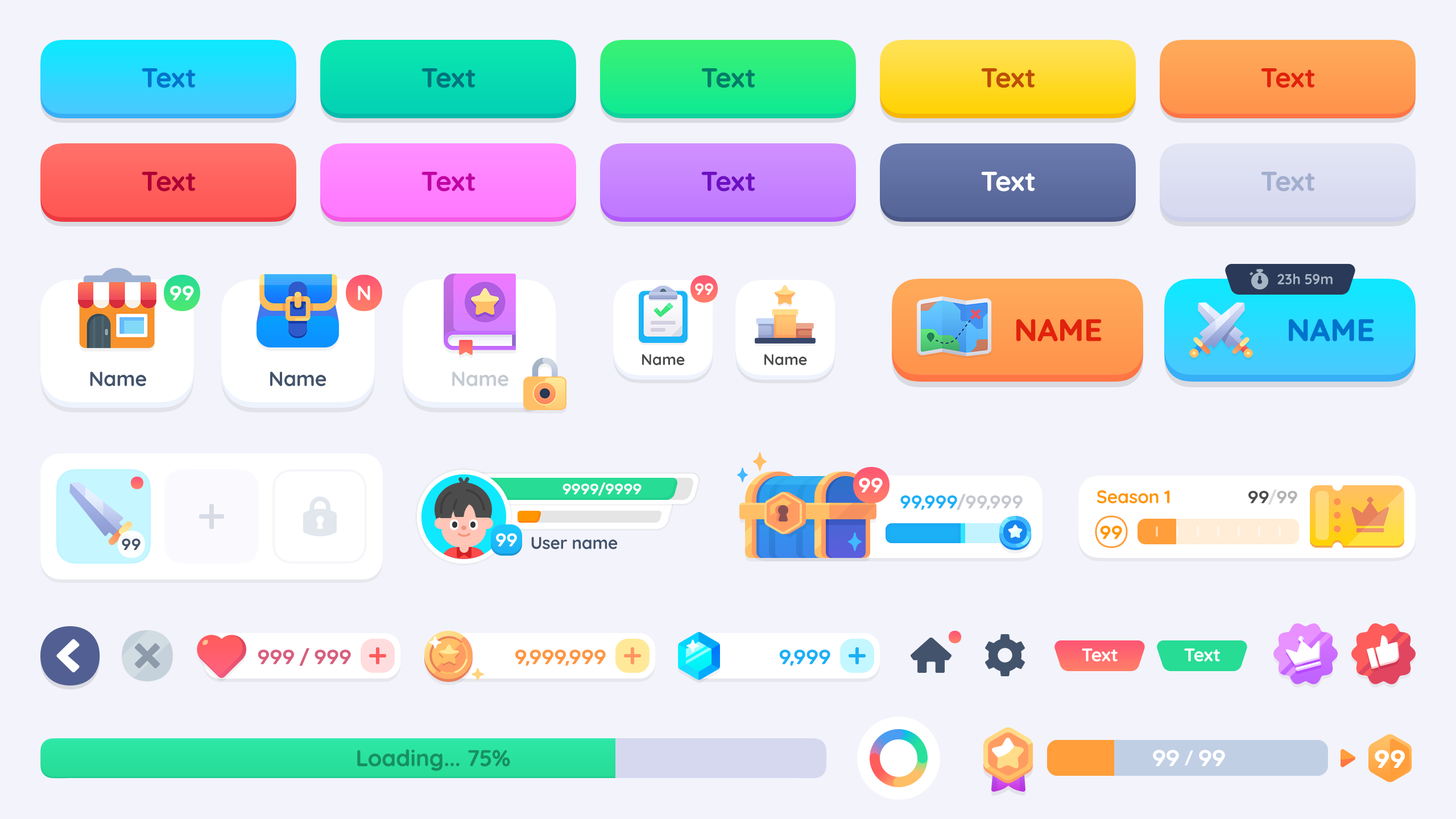
<style>
.page{position:relative;width:1456px;height:819px;background:#f3f3fb}
.page>*{position:absolute;margin:0}
.t1{font:27.3px "Quicksand-Bold";color:#0073cc}
.t2{font:27.3px "Quicksand-Bold";color:#00737d}
.t3{font:27.3px "Quicksand-Bold";color:#007c69}
.t4{font:27.3px "Quicksand-Bold";color:#bd4e04}
.t5{font:27.3px "Quicksand-Bold";color:#e1220c}
.t6{font:27.3px "Quicksand-Bold";color:#af0036}
.t7{font:27.3px "Quicksand-Bold";color:#c101a4}
.t8{font:27.3px "Quicksand-Bold";color:#6d10c1}
.t9{font:27.3px "Quicksand-Bold";color:#ffffff}
.t10{font:27.3px "Quicksand-Bold";color:#a2aecd}
.t11{font:14.2px "Quicksand-Bold";letter-spacing:-0.01em;color:#a7b4c4}
.t12{font:20.5px "Rubik-Medium";letter-spacing:-0.01em;color:#ffffff}
.t13{font:20.5px "Quicksand-Bold";letter-spacing:-0.01em;color:#ffffff;text-transform:uppercase}
.t14{font:15.9px "Rubik-Medium";letter-spacing:-0.01em;color:#ffffff;text-transform:uppercase}
.t15{font:30.7px "Quicksand-Bold";color:#e1220c;text-transform:uppercase;font-weight:bold}
.t16{font:30.7px "Quicksand-Bold";color:#0073cc;text-transform:uppercase;font-weight:bold}
.t17{font:15.4px "Quicksand-Bold";letter-spacing:-0.01em;color:#4c4c4c}
.t18{font:20.5px "Quicksand-Bold";letter-spacing:-0.01em;color:#43536c}
.t19{font:20.5px "Quicksand-Bold";letter-spacing:-0.01em;color:#c4cad1}
.t20{font:14.8px "Rubik-Medium";letter-spacing:-0.01em;color:#ffffff}
.t21{font:20.5px "Rubik-Medium";letter-spacing:-0.01em;color:#ffffff;text-transform:uppercase}
.t22{font:18.2px "Rubik-Medium";letter-spacing:-0.01em;color:#c5c8d0}
.t23{font:18.2px "Rubik-Medium";letter-spacing:-0.01em;color:#1cb0f6}
.t24{font:18.2px "Quicksand-Bold";letter-spacing:-0.01em;color:#ff9600}
.t25{font:17.4px "Rubik-Medium";letter-spacing:-0.01em;color:#4d4d4d}
.t26{font:17.4px "Rubik-Medium";letter-spacing:-0.01em;color:#d9d9d9}
.t27{font:17.4px "Rubik-Medium";letter-spacing:-0.01em;color:#b2b2b2}
.t28{font:18.2px "Rubik-Medium";letter-spacing:-0.01em;color:#ffffff}
.t29{font:18.8px "Rubik-Medium";letter-spacing:-0.01em;color:#ff9600}
.t30{font:15.9px "Rubik-Medium";letter-spacing:-0.01em;color:#43536c}
.t31{font:17.1px "Quicksand-Bold";letter-spacing:-0.01em;color:#43536c}
.t32{font:20.5px "Rubik-Medium";letter-spacing:-0.01em;color:#d85f7f;text-transform:uppercase}
.t33{font:20.5px "Rubik-Medium";letter-spacing:-0.01em;color:#fd9744;text-transform:uppercase}
.t34{font:20.5px "Rubik-Medium";letter-spacing:-0.01em;color:#1cb0f6;text-transform:uppercase}
.t35{font:18.2px "Quicksand-Bold";letter-spacing:-0.01em;color:#ffffff}
.t36{font:22.7px "Quicksand-Bold";color:#178f62}
.t37{font:22.7px "Rubik-Medium";letter-spacing:-0.01em;color:#ffffff;text-transform:uppercase}
.t38{font:17.1px "Rubik-Medium";letter-spacing:-0.01em;color:#ffffff;text-transform:uppercase}
.t39{font:25px "Rubik-SemiBold";letter-spacing:-0.01em;color:#ffffff}
</style>
<div class="page">
<p class="t1" style="left:142px;top:68px;width:54px;height:20px">Text</p>
<p class="t2" style="left:421px;top:68px;width:54px;height:20px">Text</p>
<p class="t3" style="left:701px;top:68px;width:54px;height:20px">Text</p>
<p class="t4" style="left:981px;top:68px;width:54px;height:20px">Text</p>
<p class="t5" style="left:1261px;top:68px;width:54px;height:20px">Text</p>
<p class="t6" style="left:142px;top:172px;width:54px;height:20px">Text</p>
<p class="t7" style="left:421px;top:172px;width:54px;height:20px">Text</p>
<p class="t8" style="left:701px;top:172px;width:54px;height:20px">Text</p>
<p class="t9" style="left:981px;top:172px;width:54px;height:20px">Text</p>
<p class="t10" style="left:1261px;top:172px;width:54px;height:20px">Text</p>
<p class="t11" style="left:1277px;top:274px;width:56px;height:10px">23h 59m</p>
<p class="t12" style="left:170px;top:286px;width:24px;height:14px">99</p>
<p class="t13" style="left:358px;top:286px;width:12px;height:14px">N</p>
<p class="t14" style="left:695px;top:283px;width:18px;height:12px">99</p>
<p class="t15" style="left:1016px;top:319px;width:86px;height:22px">Name</p>
<p class="t16" style="left:1289px;top:319px;width:85px;height:22px">Name</p>
<p class="t17" style="left:642px;top:354px;width:43px;height:11px">Name</p>
<p class="t17" style="left:764px;top:354px;width:43px;height:11px">Name</p>
<p class="t18" style="left:90px;top:371px;width:57px;height:15px">Name</p>
<p class="t18" style="left:270px;top:371px;width:56px;height:15px">Name</p>
<p class="t19" style="left:452px;top:371px;width:56px;height:15px">Name</p>
<p class="t20" style="left:562px;top:482px;width:80px;height:14px">9999/9999</p>
<p class="t21" style="left:859px;top:478px;width:24px;height:15px">99</p>
<p class="t22" style="left:900px;top:494px;width:123px;height:16px"><span class="t23">99,999</span>/99,999</p>
<p class="t24" style="left:1097px;top:490px;width:73px;height:13px">Season 1</p>
<p class="t25" style="left:1248px;top:489px;width:49px;height:16px">99<span class="t26">/</span><span class="t27">99</span></p>
<p class="t28" style="left:496px;top:533px;width:21px;height:14px">99</p>
<p class="t29" style="left:1100px;top:526px;width:22px;height:13px">99</p>
<p class="t30" style="left:122px;top:539px;width:18px;height:11px">99</p>
<p class="t31" style="left:531px;top:537px;width:87px;height:12px">User name</p>
<p class="t32" style="left:258px;top:648px;width:93px;height:18px">999 / 999</p>
<p class="t33" style="left:515px;top:650px;width:91px;height:16px">9,999,999</p>
<p class="t34" style="left:779px;top:650px;width:51px;height:16px">9,999</p>
<p class="t35" style="left:1082px;top:648px;width:36px;height:13px">Text</p>
<p class="t35" style="left:1184px;top:648px;width:36px;height:13px">Text</p>
<p class="t36" style="left:357px;top:749px;width:153px;height:22px">Loading... 75%</p>
<p class="t37" style="left:1153px;top:750px;width:72px;height:16px">99 <span class="t38">/</span> 99</p>
<p class="t39" style="left:1375px;top:750px;width:30px;height:18px">99</p>
</div>
